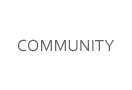
<style>
.page{position:relative;width:132px;height:90px;background:#ffffff}
.page>*{position:absolute;margin:0}
.t1{font:17px "Corbel";color:#666666}
</style>
<div class="page">
<p class="t1" style="left:18px;top:39px;width:96px;height:13px">COMMUNITY</p>
</div>
